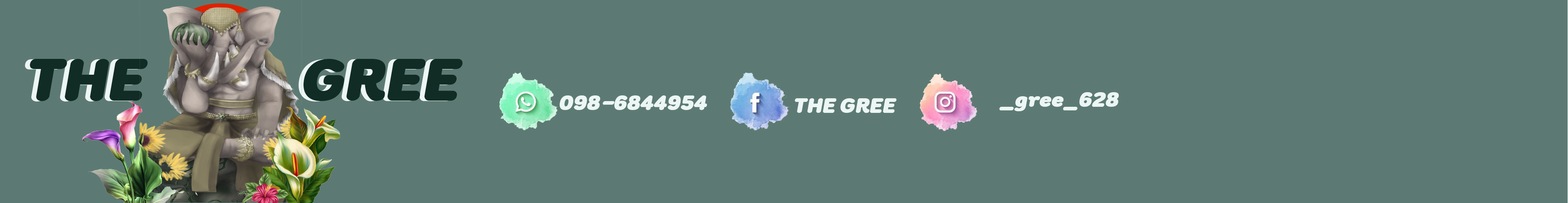
<style>
.page{position:relative;width:1568px;height:203px;background:#5c7a73}
.page>*{position:absolute;margin:0}
.t1{font:81.2px "FCHomeBlackItalic";color:#102c25}
.t2{font:28.4px "FCHomeBlackItalic";color:#ecf6f4}
</style>
<div class="page">
<p class="t1" style="left:30px;top:59px;width:433px;height:42px">THE            GREE</p>
<p class="t2" style="left:560px;top:95px;width:147px;height:15px">098-6844954</p>
<p class="t2" style="left:795px;top:98px;width:102px;height:15px">THE GREE</p>
<p class="t2" style="left:999px;top:92px;width:120px;height:20px">_gree_628</p>
</div>
